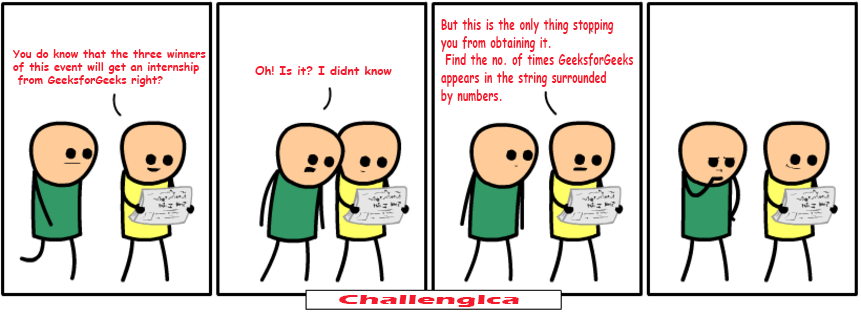
<style>
.page{position:relative;width:861px;height:315px;background:#ffffff}
.page>*{position:absolute;margin:0}
.t1{font:14.7px "ComicSansMS-Bold";color:#f51b2f;scale:0.71 1}
.t2{font:11px "ComicSansMS-Bold";color:#f51b2f}
.t3{font:12px "ComicSansMS-Bold";color:#f51b2f}
.t4{font:13.8px "ErasITC-Bold";color:#f51b2f;scale:2.22 1}
</style>
<div class="page">
<p class="t1" style="left:441px;top:18px;width:193px;height:87px">But this is the only thing stopping <br>you from obtaining it.<br> Find the no. of times GeeksforGeeks <br>appears in the string surrounded <br>by numbers.</p>
<p class="t2" style="left:13px;top:49px;width:193px;height:38px">You do know that the three winners <br>of this event will get an internship<br> from GeeksforGeeks right?</p>
<p class="t3" style="left:255px;top:66px;width:137px;height:9px">Oh! Is it? I didnt know</p>
<p class="t4" style="left:339px;top:295px;width:180px;height:12px">Challengica</p>
</div>
